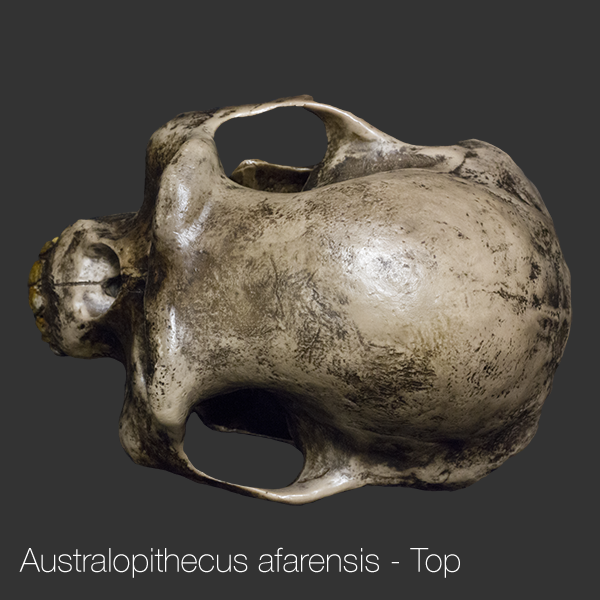
<style>
.page{position:relative;width:600px;height:600px;background:#333333}
.page>*{position:absolute;margin:0}
.t1{font:33.3px "HelveticaNeue-Thin";color:#ffffff}
</style>
<div class="page">
<p class="t1" style="left:19px;top:547px;width:441px;height:31px">Australopithecus afarensis - Top</p>
</div>
